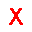
<style>
.page{position:relative;width:32px;height:32px;background:#ffffff}
.page>*{position:absolute;margin:0}
.t1{font:24px "Arial-BoldMT";color:#ff0000}
</style>
<div class="page">
<p class="t1" style="left:9px;top:8px;width:14px;height:17px">X</p>
</div>
